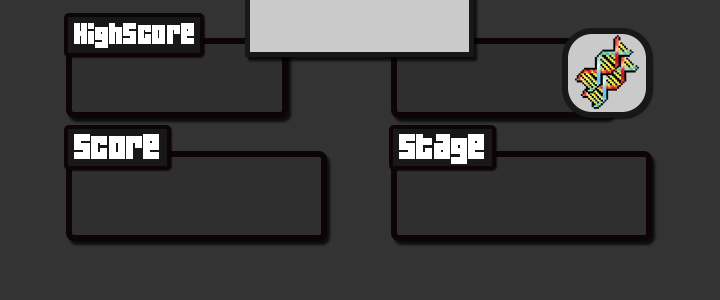
<style>
.page{position:relative;width:720px;height:300px;background:#333333}
.page>*{position:absolute;margin:0}
.t1{font:27px "04b19";letter-spacing:-0.025em;color:#ffffff;scale:0.97 1}
.t2{font:32px "04b19";letter-spacing:-0.025em;color:#ffffff;scale:0.97 1}
</style>
<div class="page">
<p class="t1" style="left:74px;top:23px;width:120px;height:25px">Highscore</p>
<p class="t2" style="left:74px;top:134px;width:85px;height:25px">score</p>
<p class="t2" style="left:399px;top:134px;width:85px;height:30px">Stage</p>
</div>
